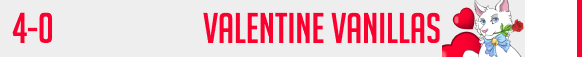
<style>
.page{position:relative;width:582px;height:57px;background:#eeeeee}
.page>*{position:absolute;margin:0}
.t1{font:42px "BigNoodleTitling";color:#fb002f}
</style>
<div class="page">
<p class="t1" style="left:12px;top:12px;width:41px;height:31px">4-0</p>
<p class="t1" style="left:203px;top:12px;width:237px;height:31px">Valentine Vanillas</p>
</div>
